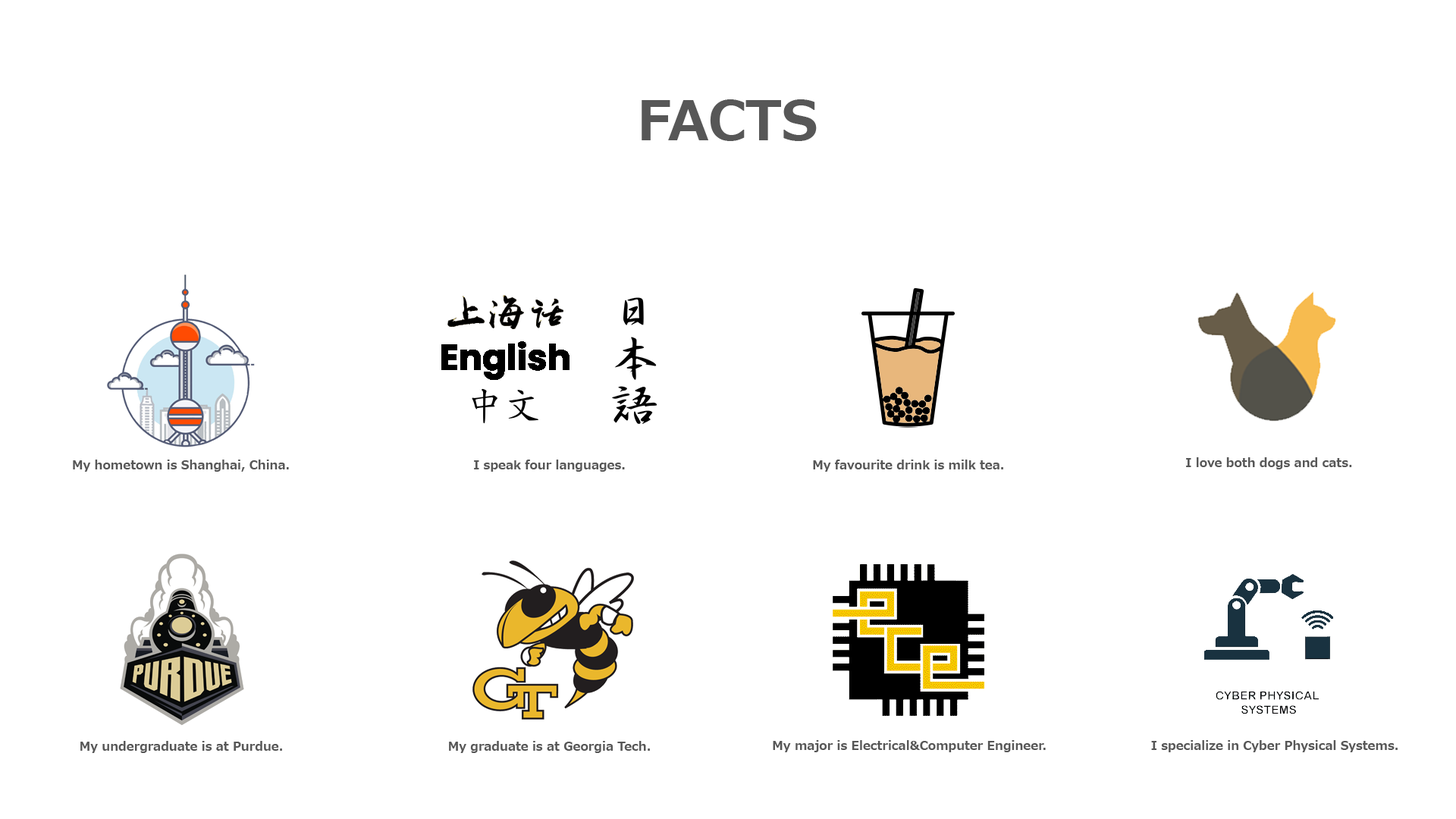
<style>
.page{position:relative;width:1456px;height:819px;background:#ffffff}
.page>*{position:absolute;margin:0}
.t1{font:54.6px "Meiryo-Bold";color:#575757}
.t2{font:12.1px "Meiryo-Bold";color:#575757}
</style>
<div class="page">
<p class="t1" style="left:642px;top:99px;width:175px;height:42px">FACTS</p>
<p class="t2" style="left:73px;top:460px;width:216px;height:12px">My hometown is Shanghai, China.</p>
<p class="t2" style="left:813px;top:460px;width:190px;height:12px">My favourite drink is milk tea.</p>
<p class="t2" style="left:1186px;top:457px;width:166px;height:12px">I love both dogs and cats.</p>
<p class="t2" style="left:80px;top:741px;width:202px;height:12px">My undergraduate is at Purdue.</p>
<p class="t2" style="left:449px;top:741px;width:201px;height:12px">My graduate is at Georgia Tech.</p>
<p class="t2" style="left:773px;top:740px;width:273px;height:12px">My major is Electrical&amp;Computer Engineer.</p>
<p class="t2" style="left:1151px;top:740px;width:247px;height:12px">I specialize in Cyber Physical Systems.</p>
</div>
